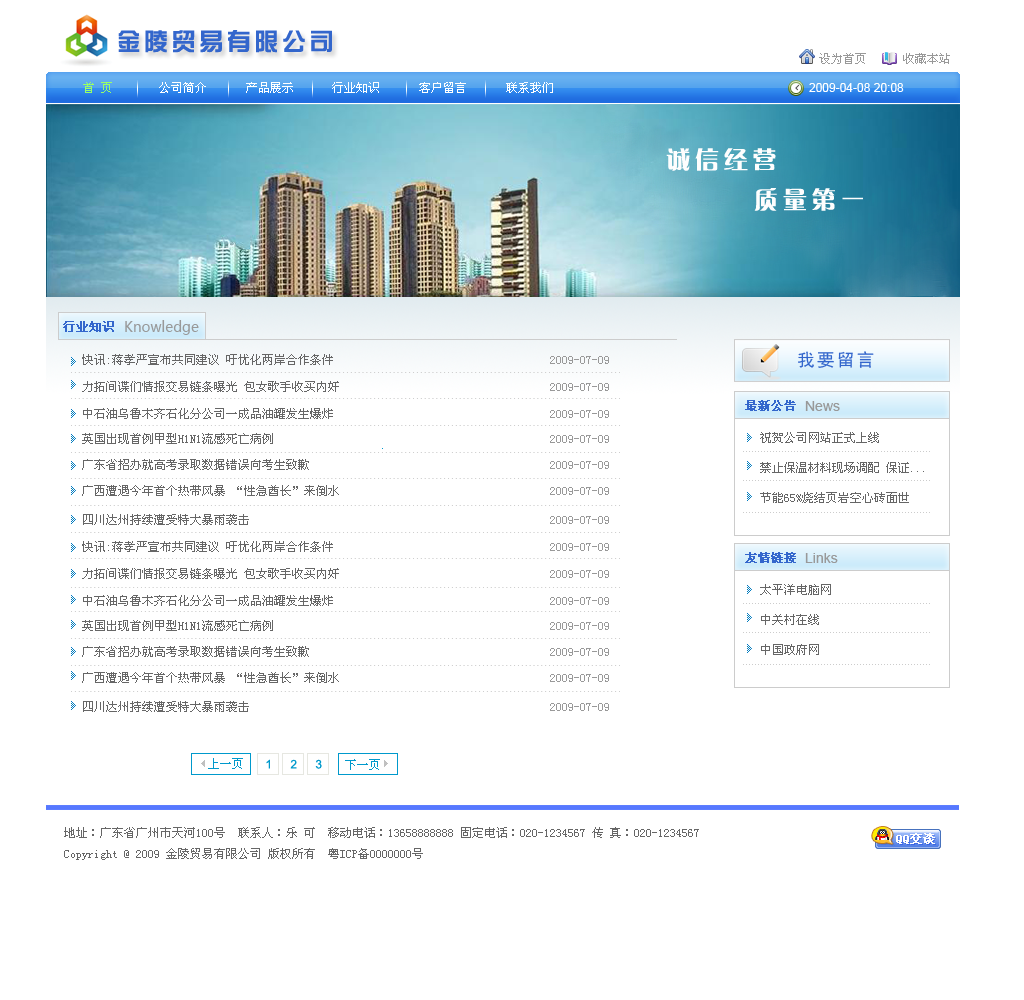
<style>
.page{position:relative;width:1024px;height:1000px;background:#ffffff}
.page>*{position:absolute;margin:0}
.t1{font:24px "HYk1gj";letter-spacing:0.15em;color:#3366cc}
.t2{font:12px "SimSun";color:#999999}
.t3{font:12px "SimSun";color:#99ff66}
.t4{font:12px "SimSun";color:#ffffff}
.t5{font:12px "ArialMT";color:#ffffff}
.t6{font:24px "FZCQJW--GB1-0";letter-spacing:0.2em;color:#fefefe}
.t7{font:12px "SimSun";color:#3366cc;font-weight:bold}
.t8{font:14px "MicrosoftYaHei";color:#999999}
.t9{font:18px "SimHei";letter-spacing:0.1em;color:#3366cc}
.t10{font:12px "SimSun";color:#666666;text-transform:uppercase}
.t11{font:12px "SimSun";color:#999999;text-transform:uppercase}
.t12{font:14px "ArialMT";color:#999999}
.t13{font:12px "SimSun";color:#666666}
</style>
<div class="page">
<p class="t1" style="left:118px;top:30px;width:214px;height:23px">金陵贸易有限公司</p>
<p class="t2" style="left:819px;top:53px;width:47px;height:11px">设为首页</p>
<p class="t2" style="left:903px;top:53px;width:47px;height:11px">收藏本站</p>
<p class="t3" style="left:83px;top:82px;width:29px;height:11px">首 页</p>
<p class="t4" style="left:159px;top:82px;width:47px;height:11px">公司简介</p>
<p class="t4" style="left:246px;top:82px;width:47px;height:11px">产品展示</p>
<p class="t4" style="left:332px;top:82px;width:47px;height:11px">行业知识</p>
<p class="t4" style="left:419px;top:82px;width:47px;height:11px">客户留言</p>
<p class="t4" style="left:506px;top:82px;width:47px;height:11px">联系我们</p>
<p class="t5" style="left:809px;top:83px;width:95px;height:9px">2009-04-08 20:08</p>
<p class="t6" style="left:666px;top:148px;width:110px;height:23px">诚信经营</p>
<p class="t6" style="left:754px;top:188px;width:109px;height:23px">质量第一</p>
<p class="t7" style="left:63px;top:321px;width:51px;height:11px">行业知识</p>
<p class="t8" style="left:125px;top:320px;width:74px;height:15px">Knowledge</p>
<p class="t9" style="left:798px;top:351px;width:76px;height:17px">我要留言</p>
<p class="t10" style="left:82px;top:354px;width:527px;height:11px">快讯:蒋孝严宣布共同建议 吁优化两岸合作条件            <span class="t11">2009-07-09</span></p>
<p class="t10" style="left:82px;top:381px;width:527px;height:11px">力拓间谍们情报交易链条曝光 包女歌手收买内奸                <span class="t11">2009-07-09</span></p>
<p class="t7" style="left:745px;top:400px;width:51px;height:11px">最新公告</p>
<p class="t12" style="left:805px;top:401px;width:35px;height:10px">News</p>
<p class="t10" style="left:83px;top:408px;width:526px;height:11px">中石油乌鲁木齐石化分公司一成品油罐发生爆炸                      <span class="t11">2009-07-09</span></p>
<p class="t10" style="left:82px;top:433px;width:527px;height:11px">英国出现首例甲型H1N1流感死亡病例                       <span class="t11">2009-07-09</span></p>
<p class="t10" style="left:760px;top:432px;width:119px;height:11px">祝贺公司网站正式上线</p>
<p class="t10" style="left:82px;top:459px;width:527px;height:11px">广东省招办就高考录取数据错误向考生致歉                       <span class="t11">2009-07-09</span></p>
<p class="t10" style="left:760px;top:462px;width:164px;height:11px">禁止保温材料现场调配 保证...</p>
<p class="t10" style="left:82px;top:485px;width:527px;height:11px">广西遭遇今年首个热带风暴 “性急酋长”来倒水                      <span class="t11">2009-07-09</span></p>
<p class="t10" style="left:760px;top:492px;width:149px;height:11px">节能65%烧结页岩空心砖面世</p>
<p class="t10" style="left:83px;top:514px;width:526px;height:11px">四川达州持续遭受特大暴雨袭击                         <span class="t11">2009-07-09</span></p>
<p class="t10" style="left:82px;top:541px;width:527px;height:11px">快讯:蒋孝严宣布共同建议 吁优化两岸合作条件            <span class="t11">2009-07-09</span></p>
<p class="t7" style="left:745px;top:552px;width:51px;height:11px">友情链接</p>
<p class="t12" style="left:805px;top:553px;width:33px;height:10px">Links</p>
<p class="t10" style="left:82px;top:568px;width:527px;height:11px">力拓间谍们情报交易链条曝光 包女歌手收买内奸                <span class="t11">2009-07-09</span></p>
<p class="t10" style="left:760px;top:584px;width:71px;height:11px">太平洋电脑网</p>
<p class="t10" style="left:83px;top:595px;width:526px;height:11px">中石油乌鲁木齐石化分公司一成品油罐发生爆炸                      <span class="t11">2009-07-09</span></p>
<p class="t10" style="left:761px;top:614px;width:58px;height:11px">中关村在线</p>
<p class="t10" style="left:82px;top:620px;width:527px;height:11px">英国出现首例甲型H1N1流感死亡病例                       <span class="t11">2009-07-09</span></p>
<p class="t10" style="left:82px;top:646px;width:527px;height:11px">广东省招办就高考录取数据错误向考生致歉                       <span class="t11">2009-07-09</span></p>
<p class="t10" style="left:761px;top:644px;width:58px;height:11px">中国政府网</p>
<p class="t10" style="left:82px;top:672px;width:527px;height:11px">广西遭遇今年首个热带风暴 “性急酋长”来倒水                      <span class="t11">2009-07-09</span></p>
<p class="t10" style="left:83px;top:701px;width:526px;height:11px">四川达州持续遭受特大暴雨袭击                         <span class="t11">2009-07-09</span></p>
<p class="t13" style="left:64px;top:827px;width:635px;height:33px">地址：广东省广州市天河100号  联系人：乐 可  移动电话：13658888888 固定电话：020-1234567 传 真：020-1234567<br>Copyright @ 2009 金陵贸易有限公司 版权所有  粤ICP备0000000号</p>
</div>
